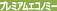
<style>
.page{position:relative;width:57px;height:11px;background:#8eaf47}
.page>*{position:absolute;margin:0}
.t1{font:10px "HiraKakuPro-W6";color:#ffffff;scale:0.64 1}
</style>
<div class="page">
<p class="t1" style="left:0px;top:1px;width:58px;height:10px">プレミアムエコノミー</p>
</div>
